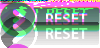
<style>
.page{position:relative;width:100px;height:48px}
.page>*{position:absolute;margin:0}
.t1{font:16px "MyriadPro-Semibold"}
</style>
<div class="page">
<p class="t1" style="left:46px;top:14px;width:42px;height:11px">RESET</p>
</div>
